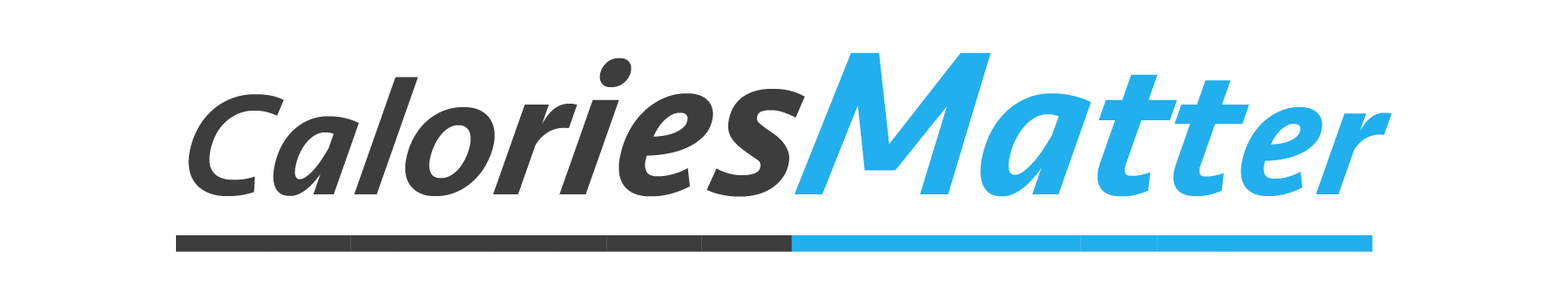
<style>
.page{position:relative;width:1568px;height:305px;background:#ffffff}
.page>*{position:absolute;margin:0}
.t1{font:147.5px "Seravek-MediumItalic";color:#3d3d3d;font-style:italic;text-decoration:underline}
.t2{font:156.7px "Seravek-MediumItalic";color:#3d3d3d;font-style:italic;text-decoration:underline}
.t3{font:165.9px "Seravek-MediumItalic";color:#3d3d3d;font-style:italic;text-decoration:underline}
.t4{font:175.2px "Seravek-MediumItalic";color:#3d3d3d;font-style:italic;text-decoration:underline}
.t5{font:184.4px "Seravek-MediumItalic";color:#3d3d3d;font-style:italic;text-decoration:underline}
.t6{font:193.6px "Seravek-MediumItalic";color:#3d3d3d;font-style:italic;text-decoration:underline}
.t7{font:202.8px "Seravek-MediumItalic";color:#3d3d3d;font-style:italic;text-decoration:underline}
.t8{font:212px "Seravek-MediumItalic";color:#3d3d3d;font-style:italic;text-decoration:underline}
.t9{font:212px "Seravek-MediumItalic";color:#21afee;font-style:italic;text-decoration:underline}
.t10{font:202.8px "Seravek-MediumItalic";color:#21afee;font-style:italic;text-decoration:underline}
.t11{font:193.6px "Seravek-MediumItalic";color:#21afee;font-style:italic;text-decoration:underline}
.t12{font:184.4px "Seravek-MediumItalic";color:#21afee;font-style:italic;text-decoration:underline}
.t13{font:175.2px "Seravek-MediumItalic";color:#21afee;font-style:italic;text-decoration:underline}
.t14{font:165.9px "Seravek-MediumItalic";color:#21afee;font-style:italic;text-decoration:underline}
</style>
<div class="page">
<p class="t1" style="left:176px;top:52px;width:1216px;height:200px">C<span class="t2">a</span><span class="t3">l</span><span class="t4">o</span><span class="t5">r</span><span class="t6">i</span><span class="t7">e</span><span class="t8">s</span><span class="t9">M</span><span class="t10">a</span><span class="t11">t</span><span class="t12">t</span><span class="t13">e</span><span class="t14">r</span></p>
</div>
